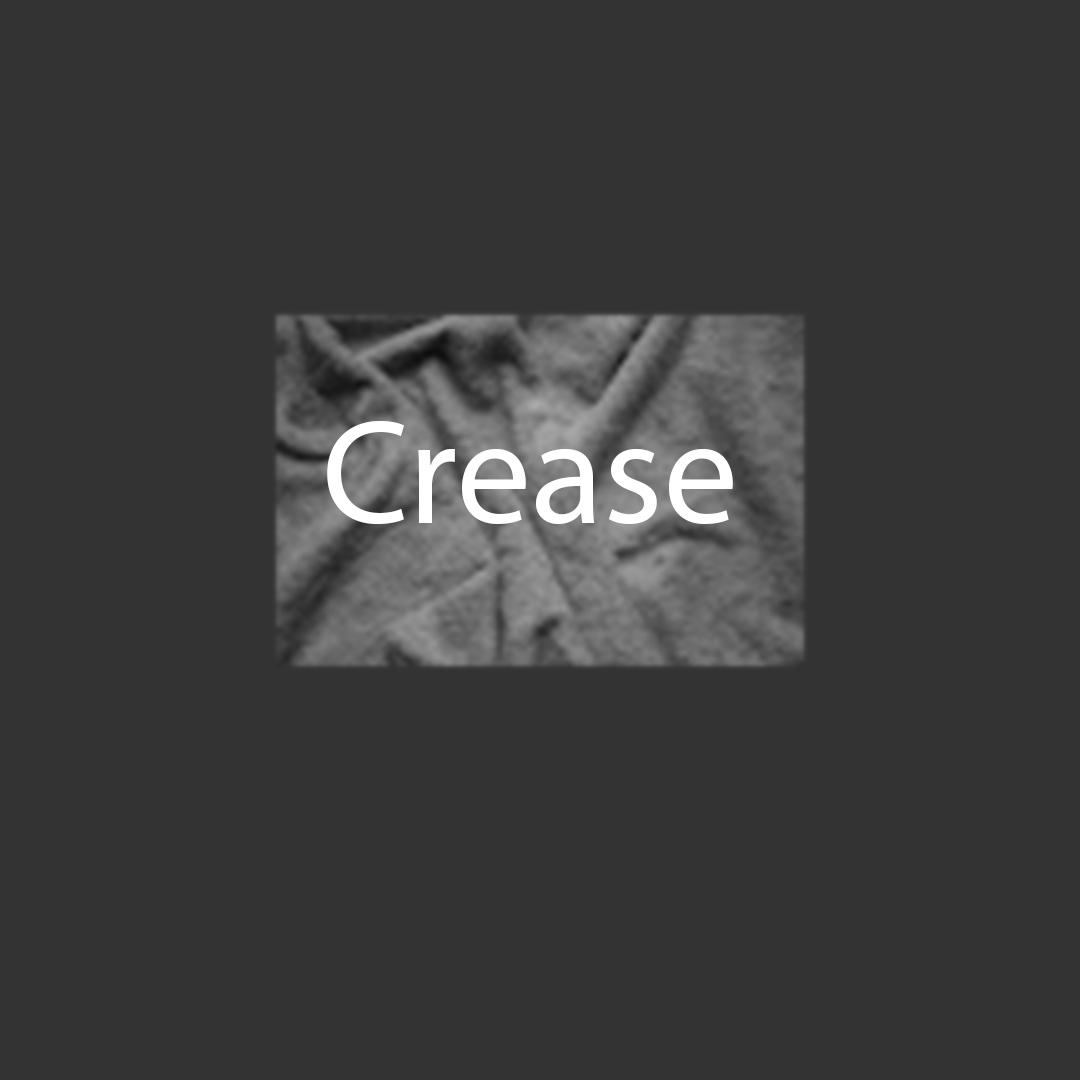
<style>
.page{position:relative;width:1080px;height:1080px;background:#333333}
.page>*{position:absolute;margin:0}
.t1{font:150px "MyriadPro-Regular";color:#ffffff}
</style>
<div class="page">
<p class="t1" style="left:327px;top:420px;width:406px;height:104px">Crease</p>
</div>
